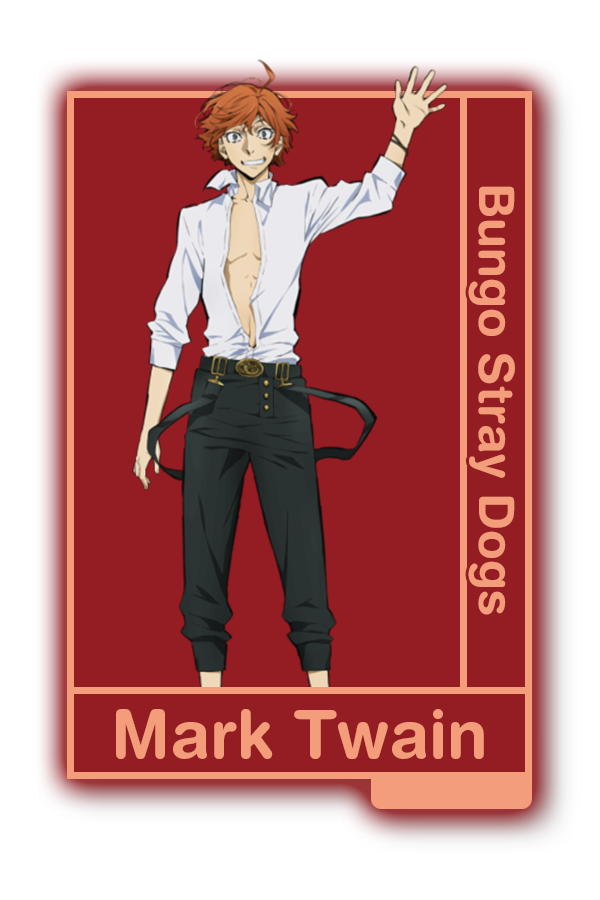
<style>
.page{position:relative;width:600px;height:900px;background:#941d23}
.page>*{position:absolute;margin:0}
.t1{font:48.8px "HelveticaRounded-Bold";color:#f39d7b}
.t2{font:66.2px "HelveticaRounded-Bold";color:#f39d7b}
</style>
<div class="page">
<p class="t1" style="left:468px;top:186px;width:47px;height:429px;rotate:90deg">Bungo Stray Dogs</p>
<p class="t2" style="left:116px;top:709px;width:368px;height:50px">Mark Twain</p>
</div>
